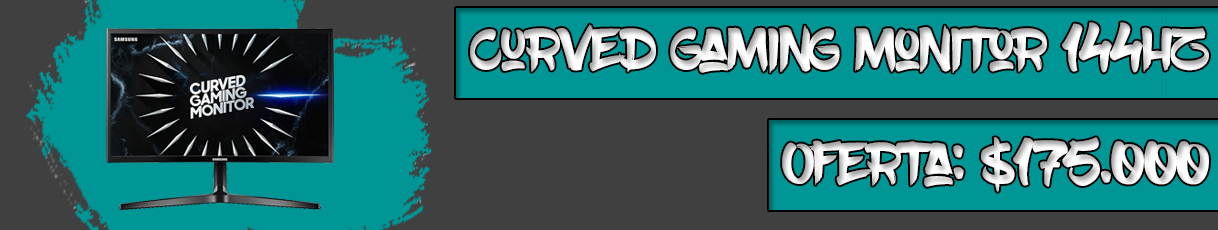
<style>
.page{position:relative;width:1218px;height:230px;background:#009696}
.page>*{position:absolute;margin:0}
.t1{font:60px "BlowBrush"}
</style>
<div class="page">
<p class="t1" style="left:470px;top:22px;width:739px;height:51px">Curved Gaming Monitor 144hz - samsung</p>
<p class="t1" style="left:782px;top:137px;width:427px;height:55px">Oferta: $175.000</p>
</div>
